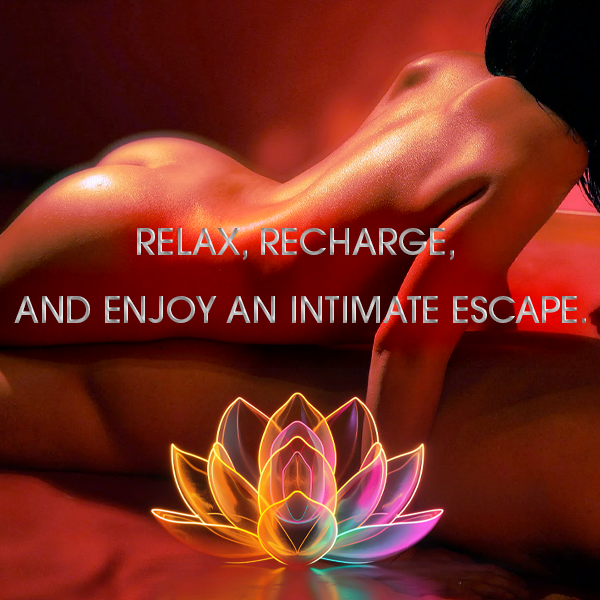
<style>
.page{position:relative;width:600px;height:600px}
.page>*{position:absolute;margin:0}
.t1{font:36.3px/67.7px "ITCAvantGardePro-Md";text-transform:uppercase}
</style>
<div class="page">
<p class="t1" style="left:14px;top:228px;width:572px;height:95px;text-align:center">Relax, recharge, <br>and enjoy an intimate escape.</p>
</div>
